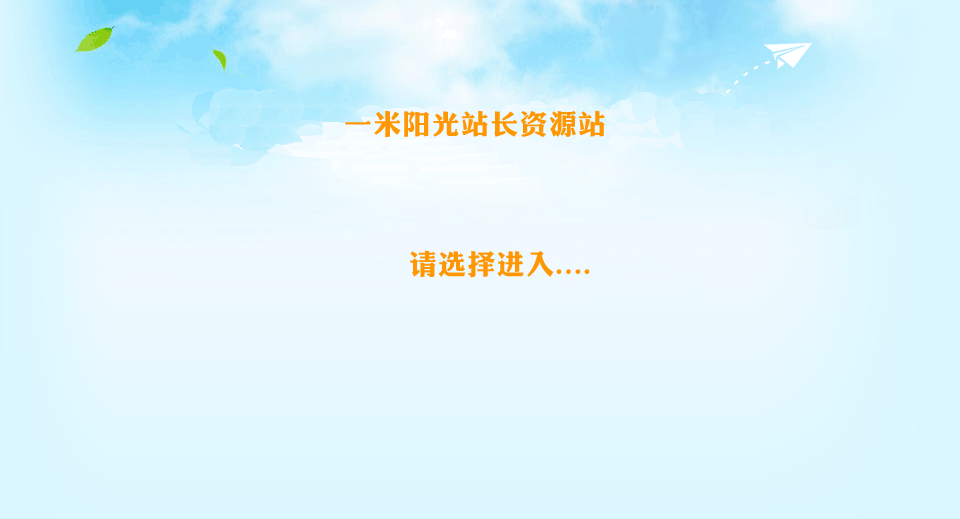
<style>
.page{position:relative;width:960px;height:519px}
.page>*{position:absolute;margin:0}
.t1{font:27.9px "DFPLiJinHeiW8";letter-spacing:0.05em;color:#ff9703;text-transform:uppercase}
</style>
<div class="page">
<p class="t1" style="left:345px;top:110px;width:260px;height:28px">一米阳光站长资源站</p>
<p class="t1" style="left:410px;top:250px;width:180px;height:28px">请选择进入....</p>
</div>
